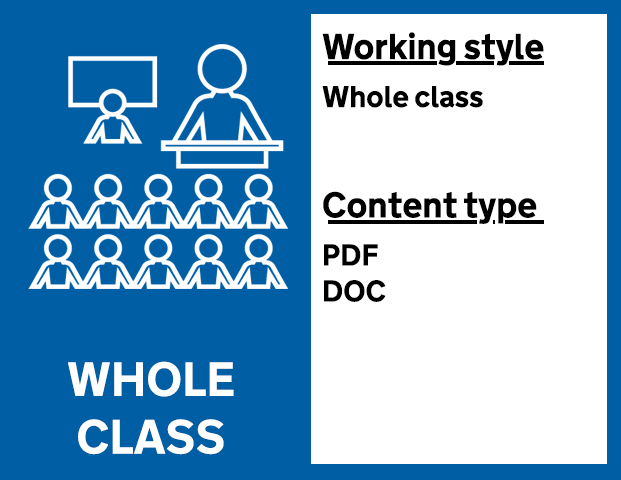
<style>
.page{position:relative;width:621px;height:480px;background:#005ea5}
.page>*{position:absolute;margin:0}
.t1{font:36px "NTA-Bold";color:#000000}
.t2{font:30px "NTA-Bold";color:#000000}
.t3{font:48px "NTA-Bold";color:#ffffff}
</style>
<div class="page">
<p class="t1" style="left:322px;top:32px;width:222px;height:270px">Working style<br><span class="t2">Whole class<br></span><br>Content type<br><span class="t2">PDF<br>DOC</span></p>
<p class="t3" style="left:68px;top:361px;width:166px;height:94px;text-align:center">WHOLE<br>CLASS</p>
</div>
